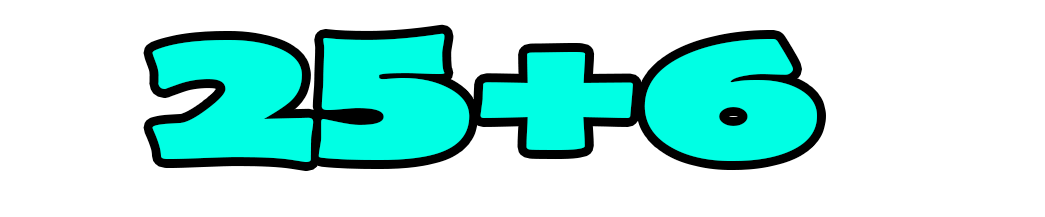
<style>
.page{position:relative;width:1045px;height:217px;background:#ffffff}
.page>*{position:absolute;margin:0}
.t1{font:195.3px "BerlinSansFB-Bold";color:#00ffe4;scale:1.55 1}
</style>
<div class="page">
<p class="t1" style="left:152px;top:33px;width:665px;height:129px">25+6</p>
</div>
